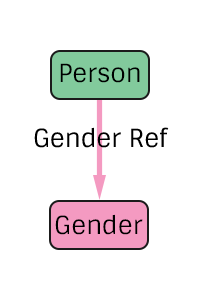
<style>
.page{position:relative;width:200px;height:300px;background:#ffffff}
.page>*{position:absolute;margin:0}
.t1{font:25px "Sintony";color:#000000}
</style>
<div class="page">
<p class="t1" style="left:60px;top:63px;width:80px;height:20px">Person</p>
<p class="t1" style="left:34px;top:127px;width:135px;height:21px">Gender Ref</p>
<p class="t1" style="left:55px;top:214px;width:88px;height:21px">Gender</p>
</div>
